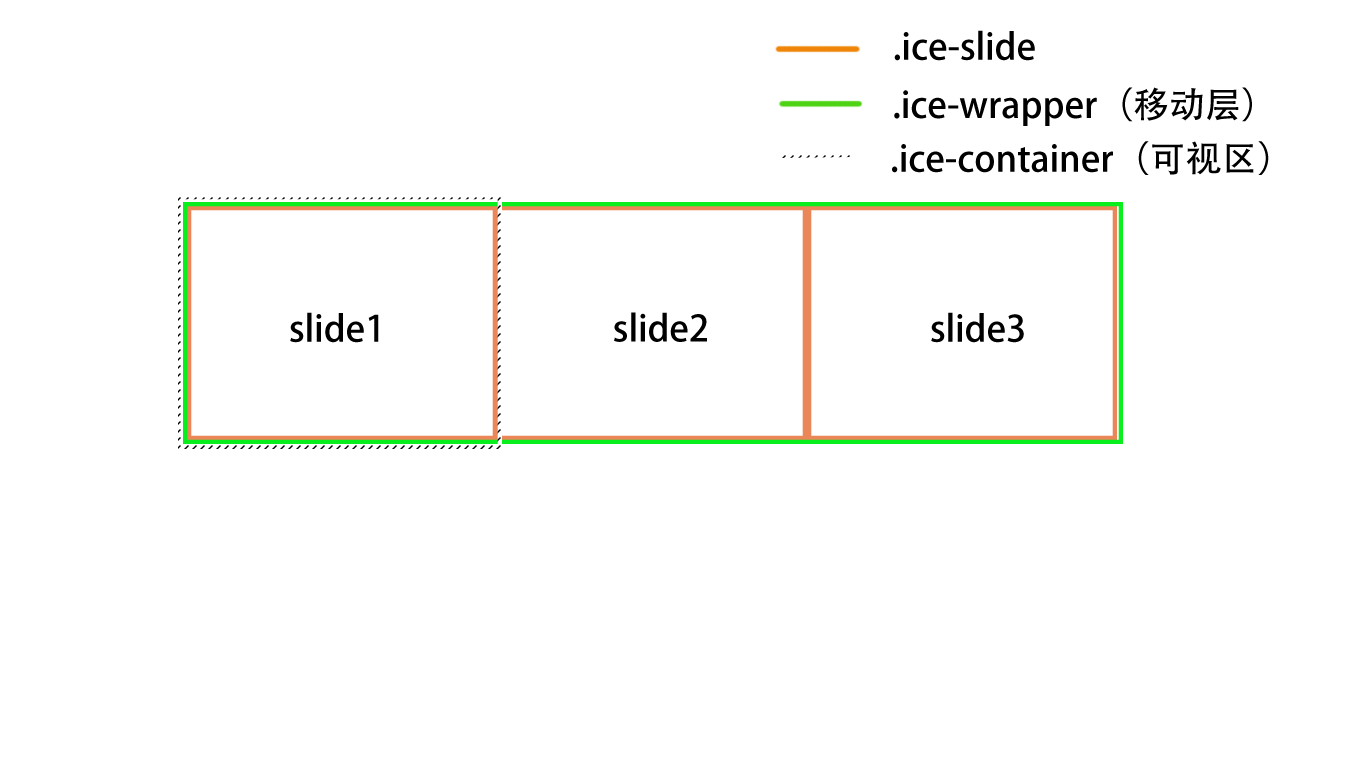
<style>
.page{position:relative;width:1366px;height:768px;background:#ffffff}
.page>*{position:absolute;margin:0}
.t1{font:36px "AdobeHeitiStd-Regular";color:#000000}
</style>
<div class="page">
<p class="t1" style="left:894px;top:30px;width:141px;height:31px">.ice-slide</p>
<p class="t1" style="left:894px;top:87px;width:358px;height:39px">.ice-wrapper（移动层）</p>
<p class="t1" style="left:892px;top:141px;width:377px;height:34px">.ice-container（可视区）</p>
<p class="t1" style="left:290px;top:312px;width:89px;height:31px">slide1</p>
<p class="t1" style="left:614px;top:312px;width:93px;height:30px">slide2</p>
<p class="t1" style="left:931px;top:312px;width:93px;height:31px">slide3</p>
</div>
